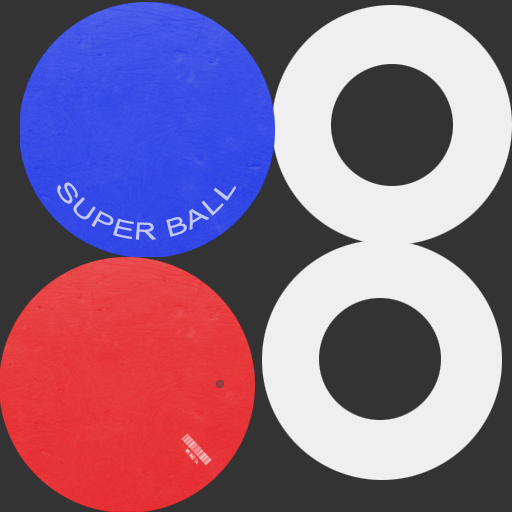
<style>
.page{position:relative;width:512px;height:512px;background:#333333}
.page>*{position:absolute;margin:0}
.t1{font:24px "ArialMT";color:#c2c8f8}
</style>
<div class="page">
<p class="t1" style="left:57px;top:182px;width:180px;height:58px;text-align:center">SUPER BALL</p>
</div>
